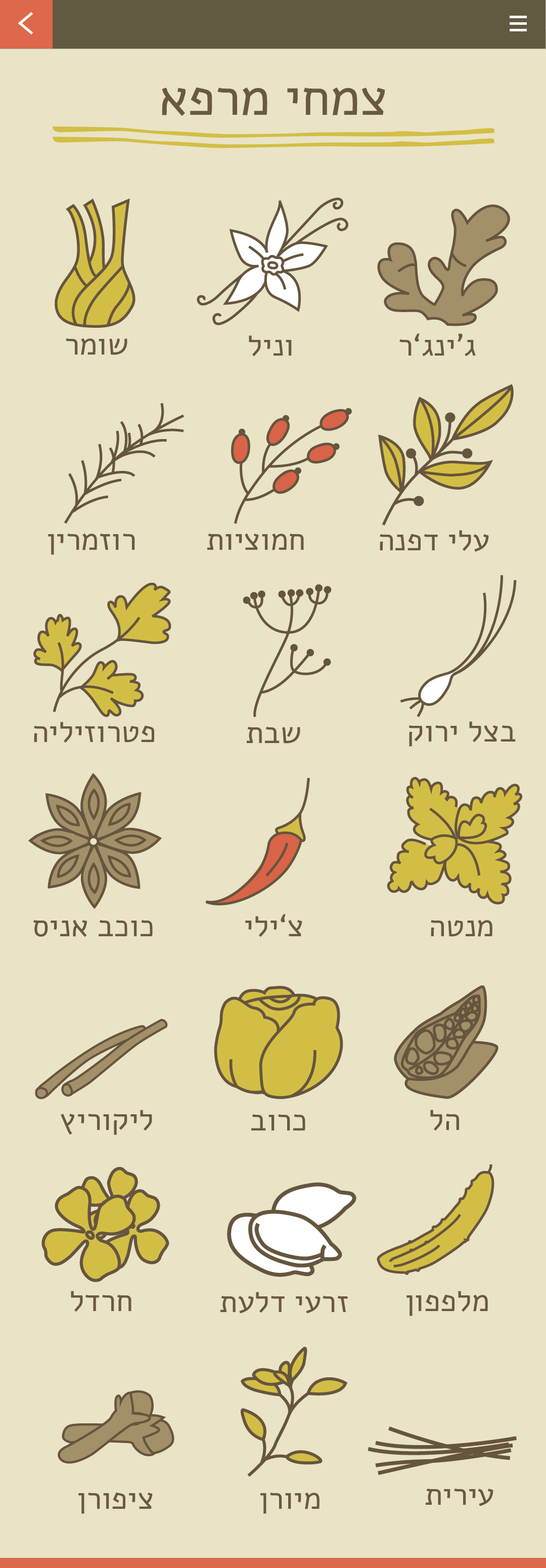
<style>
.page{position:relative;width:546px;height:1568px;background:#e9e4c6}
.page>*{position:absolute;margin:0}
.t1{font:51.3px "Alef-Regular";color:#6a5942}
.t2{font:30.8px "Alef-Regular";color:#6a5942}
</style>
<div class="page">
<p class="t1" style="left:162px;top:87px;width:223px;height:29px">אפרמ יחמצ</p>
<p class="t2" style="left:66px;top:338px;width:61px;height:17px">רמוש</p>
<p class="t2" style="left:249px;top:335px;width:43px;height:22px">לינו</p>
<p class="t2" style="left:400px;top:333px;width:76px;height:23px">ר‘גני’ג</p>
<p class="t2" style="left:48px;top:533px;width:87px;height:22px">ןירמזור</p>
<p class="t2" style="left:207px;top:533px;width:97px;height:17px">תויצומח</p>
<p class="t2" style="left:380px;top:530px;width:109px;height:22px">הנפד ילע</p>
<p class="t2" style="left:34px;top:722px;width:120px;height:21px">היליזורטפ</p>
<p class="t2" style="left:409px;top:721px;width:107px;height:26px">קורי לצב</p>
<p class="t2" style="left:247px;top:727px;width:53px;height:17px">תבש</p>
<p class="t2" style="left:245px;top:914px;width:57px;height:23px">ילי‘צ</p>
<p class="t2" style="left:33px;top:920px;width:120px;height:17px">סינא בכוכ</p>
<p class="t2" style="left:431px;top:920px;width:62px;height:17px">הטנמ</p>
<p class="t2" style="left:61px;top:1110px;width:91px;height:25px">ץירוקיל</p>
<p class="t2" style="left:430px;top:1110px;width:29px;height:21px">לה</p>
<p class="t2" style="left:251px;top:1114px;width:55px;height:16px">בורכ</p>
<p class="t2" style="left:71px;top:1291px;width:61px;height:21px">לדרח</p>
<p class="t2" style="left:221px;top:1292px;width:127px;height:22px">תעלד יערז</p>
<p class="t2" style="left:407px;top:1291px;width:81px;height:25px">ןופפלמ</p>
<p class="t2" style="left:78px;top:1492px;width:75px;height:22px">ןרופיצ</p>
<p class="t2" style="left:260px;top:1492px;width:60px;height:22px">ןרוימ</p>
<p class="t2" style="left:426px;top:1489px;width:68px;height:17px">תיריע</p>
</div>
